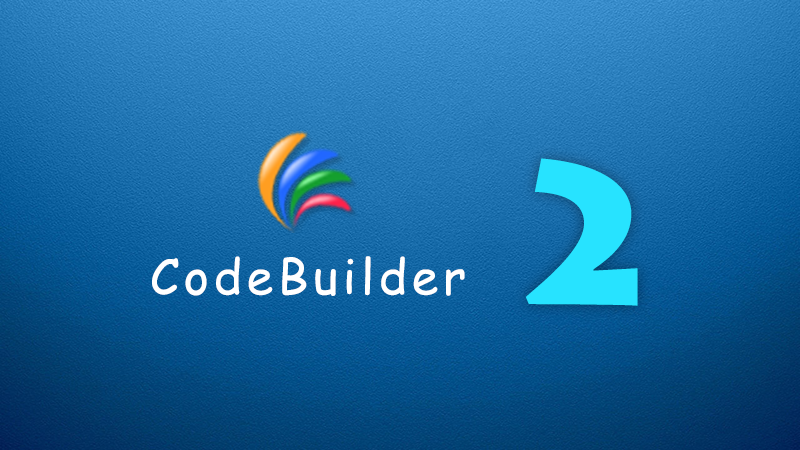
<style>
.page{position:relative;width:800px;height:450px}
.page>*{position:absolute;margin:0}
.t1{font:200px "LithosPro-Black";letter-spacing:0.1em;color:#27e3ff}
.t2{font:48px "ComicSansMS";letter-spacing:0.1em;color:#ffffff}
</style>
<div class="page">
<p class="t1" style="left:525px;top:158px;width:113px;height:148px">2</p>
<p class="t2" style="left:152px;top:256px;width:313px;height:40px">CodeBuilder</p>
</div>
